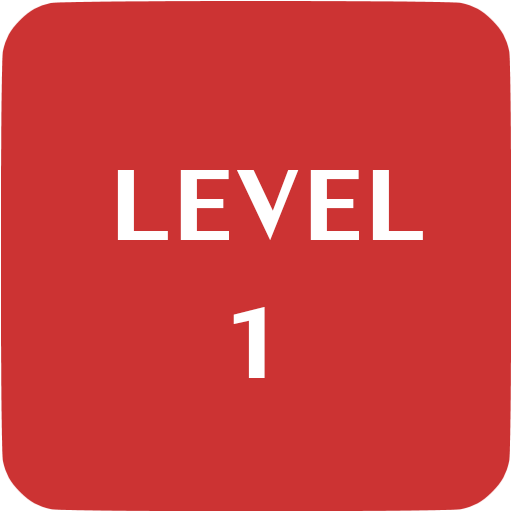
<style>
.page{position:relative;width:512px;height:512px;background:#cc3333}
.page>*{position:absolute;margin:0}
.t1{font:150px "LilyUPC";letter-spacing:0.05em;color:#ffffff}
</style>
<div class="page">
<p class="t1" style="left:117px;top:170px;width:306px;height:70px">LEVEL</p>
<p class="t1" style="left:233px;top:307px;width:32px;height:71px">1</p>
</div>
